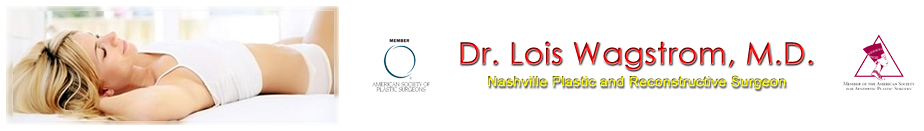
<style>
.page{position:relative;width:924px;height:131px;background:#ffffff}
.page>*{position:absolute;margin:0}
.t1{font:30px "CenturyGothic";font-weight:bold}
.t2{font:14px "ArialMT";font-weight:bold}
</style>
<div class="page">
<p class="t1" style="left:460px;top:41px;width:353px;height:30px">Dr. Lois Wagstrom, M.D.</p>
<p class="t2" style="left:488px;top:75px;width:298px;height:14px">Nashville Plastic and Reconstructive Surgeon</p>
</div>
